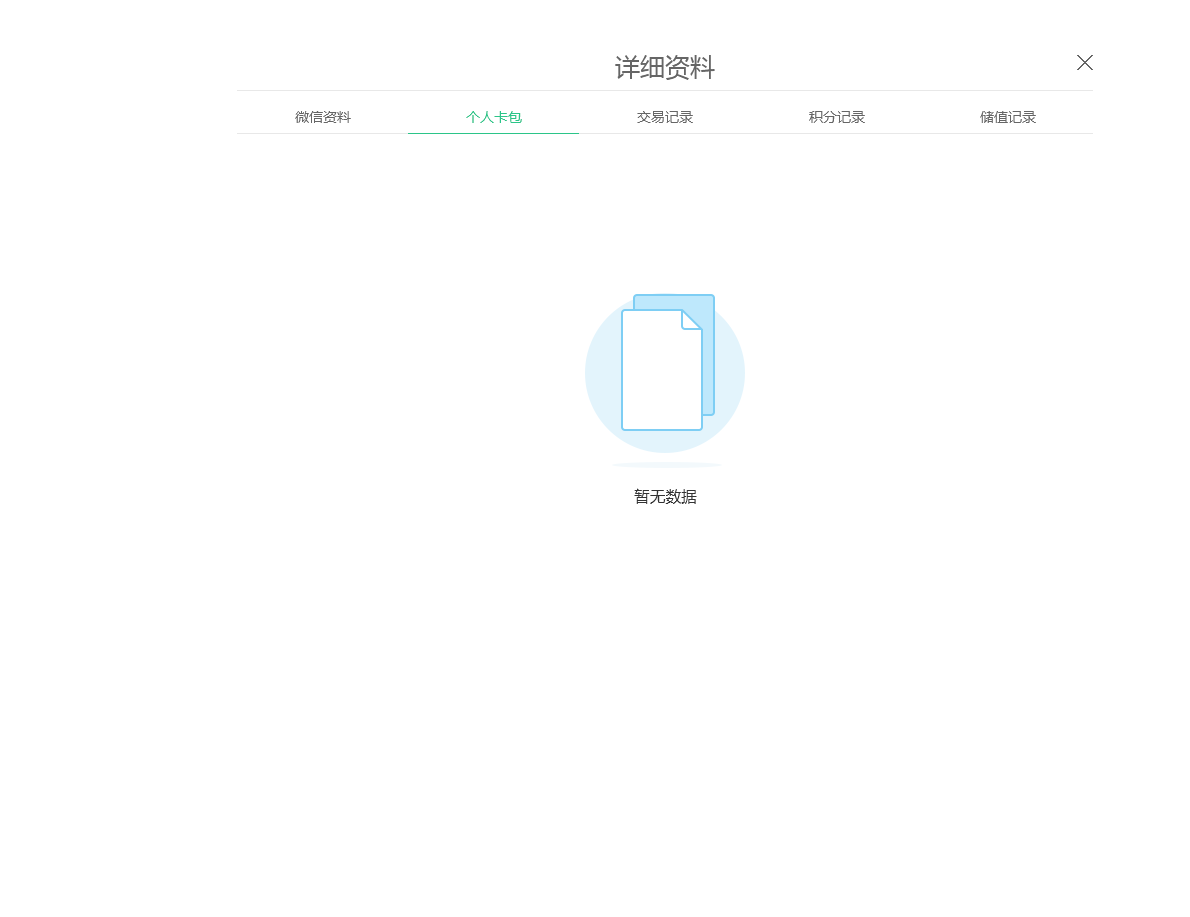
<style>
.page{position:relative;width:1190px;height:917px;background:#ffffff}
.page>*{position:absolute;margin:0}
.t1{font:25px "MicrosoftYaHei";color:#666666}
.t2{font:14px "MicrosoftYaHei";color:#666666}
.t3{font:14px "MicrosoftYaHei";color:#2bc589}
.t4{font:16px "FZLTHK--GBK1-0";letter-spacing:-0.025em;color:#333333}
</style>
<div class="page">
<p class="t1" style="left:615px;top:55px;width:100px;height:25px">详细资料</p>
<p class="t2" style="left:295px;top:111px;width:56px;height:12px">微信资料</p>
<p class="t3" style="left:466px;top:111px;width:56px;height:12px">个人卡包</p>
<p class="t2" style="left:637px;top:111px;width:56px;height:12px">交易记录</p>
<p class="t2" style="left:809px;top:111px;width:56px;height:12px">积分记录</p>
<p class="t2" style="left:980px;top:111px;width:56px;height:12px">储值记录</p>
<p class="t4" style="left:634px;top:488px;width:63px;height:16px">暂无数据</p>
</div>
